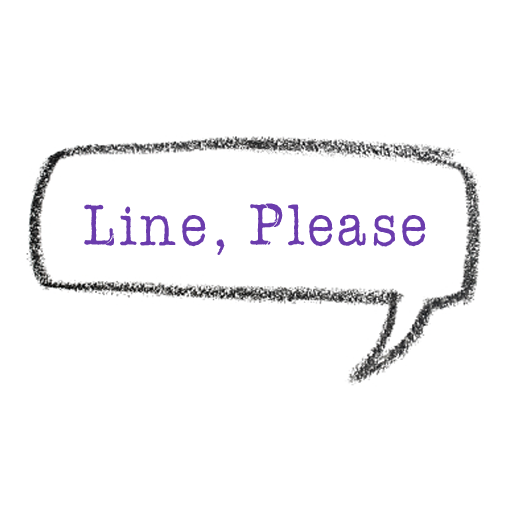
<style>
.page{position:relative;width:512px;height:512px;background:#ffffff}
.page>*{position:absolute;margin:0}
.t1{font:60px "AmerTypewriterITCbyBT-Medium";color:#6b3cad}
</style>
<div class="page">
<p class="t1" style="left:84px;top:203px;width:342px;height:52px">Line, Please</p>
</div>
